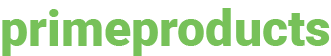
<style>
.page{position:relative;width:331px;height:56px;background:#ffffff}
.page>*{position:absolute;margin:0}
.t1{font:50px "Roboto-Black";color:#77c159}
</style>
<div class="page">
<p class="t1" style="left:2px;top:8px;width:328px;height:48px">primeproducts</p>
</div>
